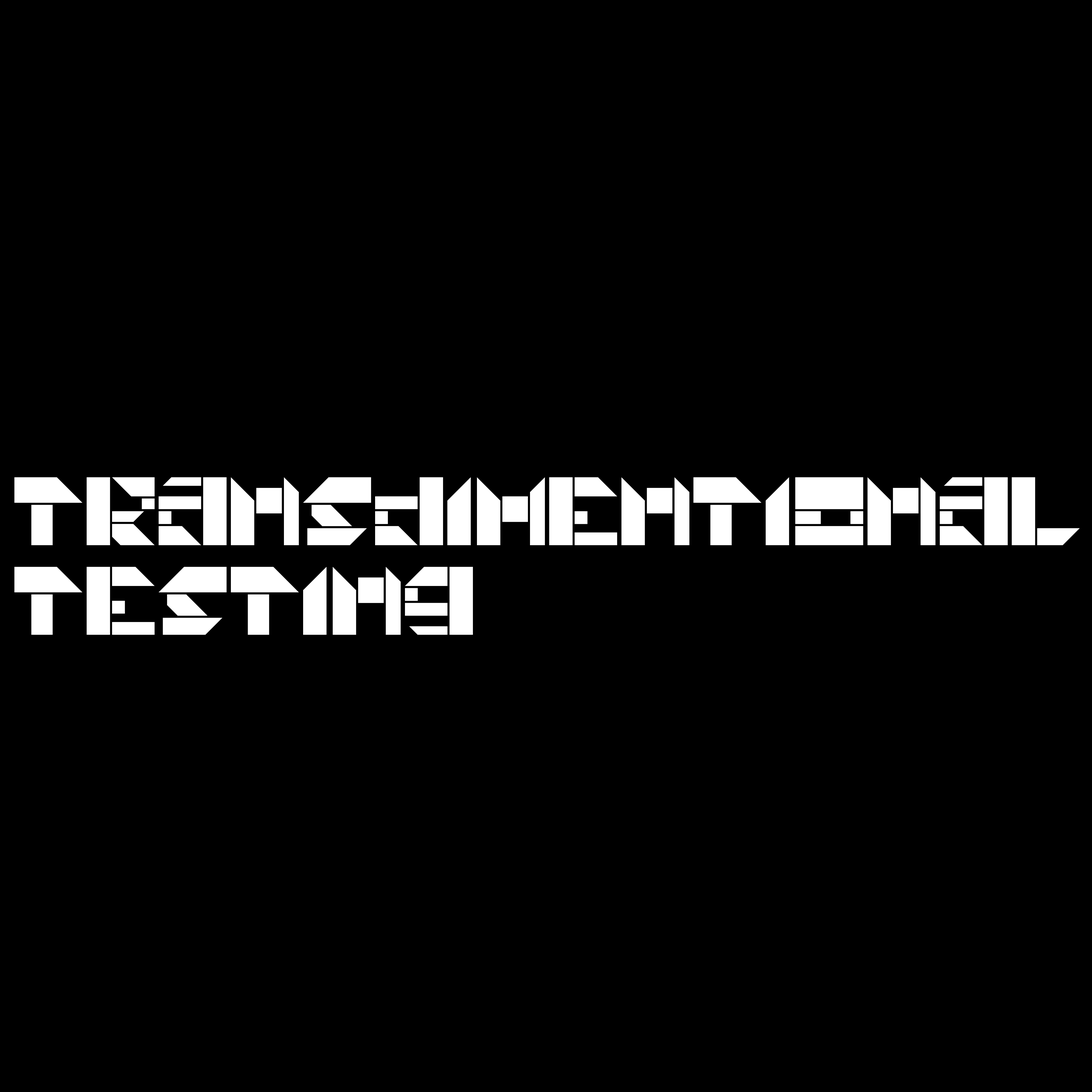
<style>
.page{position:relative;width:1092px;height:1092px;background:#000000}
.page>*{position:absolute;margin:0}
.t1{font:67.9px/89.7px "Universal-Union";color:#ffffff}
</style>
<div class="page">
<p class="t1" style="left:14px;top:477px;width:1066px;height:158px">Transdimentional<br>testing</p>
</div>
